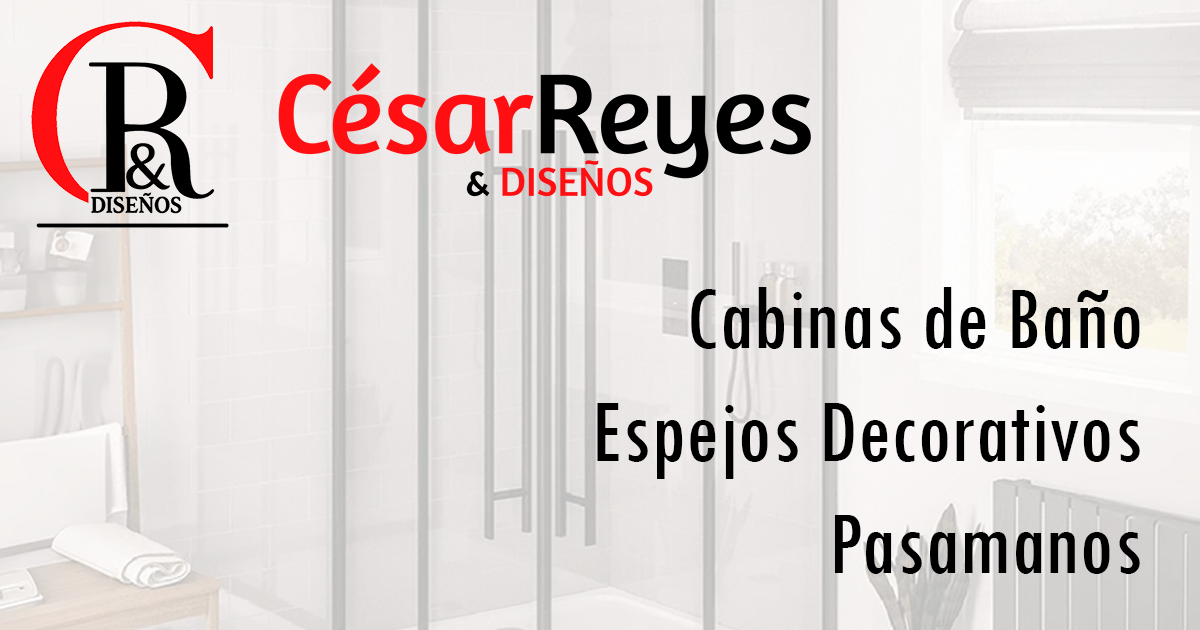
<style>
.page{position:relative;width:1200px;height:630px}
.page>*{position:absolute;margin:0}
.t1{font:93.7px/112.5px "TwCenMT-Condensed";color:#000000}
</style>
<div class="page">
<p class="t1" style="left:597px;top:287px;width:543px;height:287px;text-align:right">Cabinas de Baño<br>Espejos Decorativos<br>Pasamanos</p>
</div>
